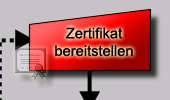
<style>
.page{position:relative;width:170px;height:100px;background:#c6c3c6}
.page>*{position:absolute;margin:0}
.t1{font:14.7px "ArialMT";color:#000000}
</style>
<div class="page">
<p class="t1" style="left:55px;top:27px;width:78px;height:30px;text-align:center">Zertifikat<br>bereitstellen</p>
</div>
